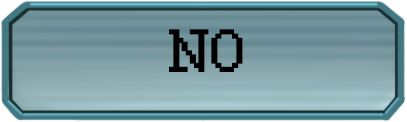
<style>
.page{position:relative;width:407px;height:122px}
.page>*{position:absolute;margin:0}
.t1{font:66.7px "Courier";color:#000000;font-weight:bold}
</style>
<div class="page">
<p class="t1" style="left:169px;top:29px;width:74px;height:43px">NO</p>
</div>
